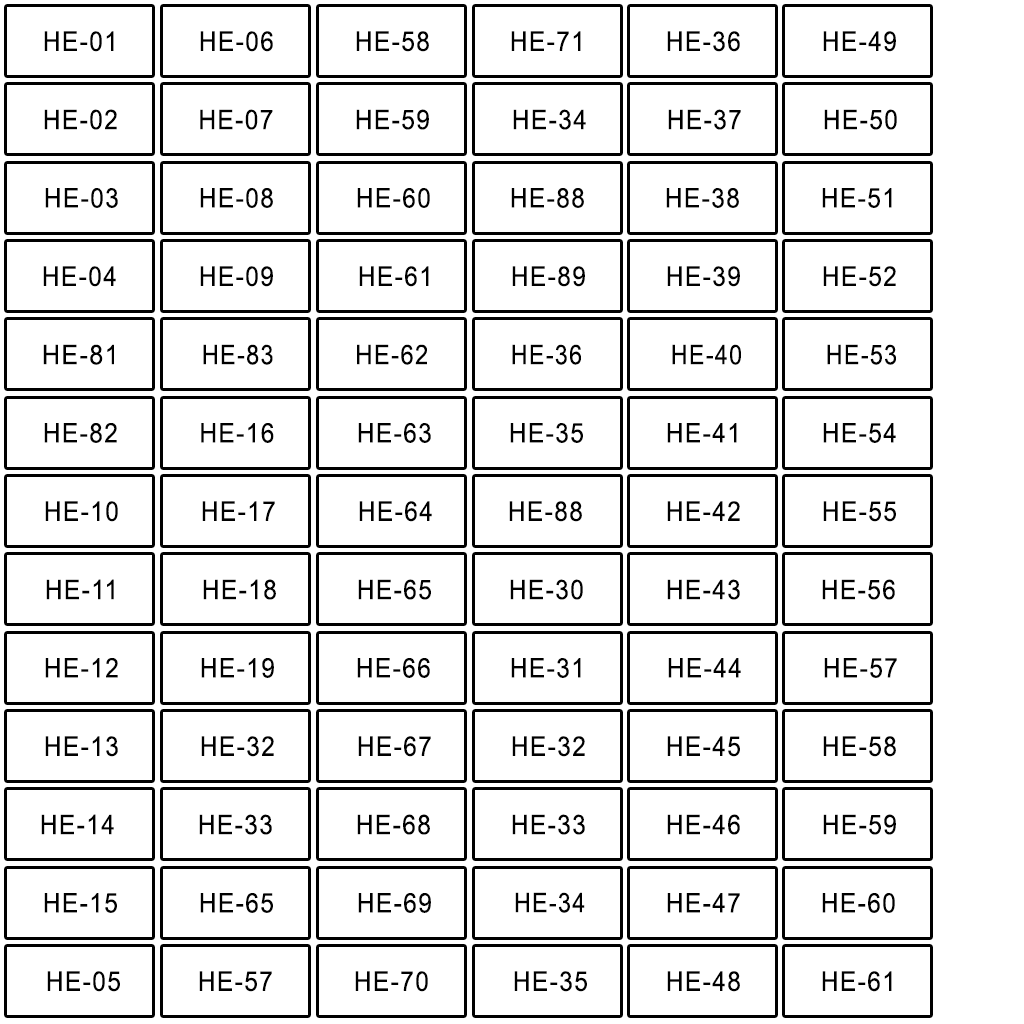
<style>
.page{position:relative;width:1024px;height:1024px;background:#ffffff}
.page>*{position:absolute;margin:0}
.t1{font:46.3px "ArialMT";letter-spacing:0.06em;color:#000000;scale:0.9 1}
.t2{font:46.4px "ArialMT";letter-spacing:0.06em;color:#000000;scale:0.92 1}
.t3{font:46.4px "ArialMT";letter-spacing:0.06em;color:#000000;scale:0.86 1}
.t4{font:46.4px "ArialMT";letter-spacing:0.06em;color:#000000;scale:0.88 1}
</style>
<div class="page">
<p class="t1" style="left:44px;top:31px;width:70px;height:21px">HE-01</p>
<p class="t1" style="left:200px;top:31px;width:73px;height:21px">HE-06</p>
<p class="t1" style="left:356px;top:31px;width:73px;height:21px">HE-58</p>
<p class="t1" style="left:511px;top:31px;width:70px;height:20px">HE-71</p>
<p class="t1" style="left:667px;top:31px;width:73px;height:21px">HE-36</p>
<p class="t1" style="left:823px;top:31px;width:73px;height:21px">HE-49</p>
<p class="t1" style="left:44px;top:109px;width:73px;height:21px">HE-02</p>
<p class="t1" style="left:200px;top:109px;width:73px;height:21px">HE-07</p>
<p class="t1" style="left:356px;top:109px;width:73px;height:21px">HE-59</p>
<p class="t1" style="left:513px;top:109px;width:73px;height:21px">HE-34</p>
<p class="t1" style="left:668px;top:109px;width:73px;height:21px">HE-37</p>
<p class="t1" style="left:824px;top:109px;width:73px;height:21px">HE-50</p>
<p class="t1" style="left:45px;top:188px;width:73px;height:20px">HE-03</p>
<p class="t1" style="left:200px;top:188px;width:73px;height:20px">HE-08</p>
<p class="t1" style="left:357px;top:188px;width:73px;height:20px">HE-60</p>
<p class="t1" style="left:511px;top:188px;width:73px;height:20px">HE-88</p>
<p class="t1" style="left:666px;top:188px;width:73px;height:20px">HE-38</p>
<p class="t1" style="left:822px;top:188px;width:70px;height:20px">HE-51</p>
<p class="t1" style="left:43px;top:266px;width:73px;height:21px">HE-04</p>
<p class="t1" style="left:200px;top:266px;width:73px;height:21px">HE-09</p>
<p class="t1" style="left:359px;top:266px;width:70px;height:21px">HE-61</p>
<p class="t1" style="left:512px;top:266px;width:73px;height:21px">HE-89</p>
<p class="t1" style="left:667px;top:266px;width:73px;height:21px">HE-39</p>
<p class="t1" style="left:823px;top:266px;width:73px;height:21px">HE-52</p>
<p class="t2" style="left:43px;top:344px;width:71px;height:21px">HE-81</p>
<p class="t3" style="left:203px;top:344px;width:70px;height:21px">HE-83</p>
<p class="t4" style="left:357px;top:344px;width:70px;height:21px">HE-62</p>
<p class="t3" style="left:512px;top:344px;width:69px;height:21px">HE-36</p>
<p class="t3" style="left:672px;top:344px;width:69px;height:21px">HE-40</p>
<p class="t3" style="left:827px;top:344px;width:69px;height:21px">HE-53</p>
<p class="t1" style="left:44px;top:423px;width:73px;height:20px">HE-82</p>
<p class="t1" style="left:201px;top:423px;width:73px;height:20px">HE-16</p>
<p class="t1" style="left:358px;top:423px;width:73px;height:20px">HE-63</p>
<p class="t1" style="left:510px;top:423px;width:73px;height:20px">HE-35</p>
<p class="t1" style="left:667px;top:423px;width:70px;height:20px">HE-41</p>
<p class="t1" style="left:823px;top:423px;width:73px;height:20px">HE-54</p>
<p class="t1" style="left:45px;top:501px;width:73px;height:21px">HE-10</p>
<p class="t1" style="left:202px;top:501px;width:73px;height:20px">HE-17</p>
<p class="t1" style="left:359px;top:501px;width:73px;height:21px">HE-64</p>
<p class="t1" style="left:509px;top:501px;width:73px;height:21px">HE-88</p>
<p class="t1" style="left:667px;top:501px;width:73px;height:20px">HE-42</p>
<p class="t1" style="left:823px;top:501px;width:73px;height:21px">HE-55</p>
<p class="t1" style="left:46px;top:579px;width:68px;height:21px">HE-11</p>
<p class="t1" style="left:203px;top:579px;width:73px;height:21px">HE-18</p>
<p class="t1" style="left:358px;top:579px;width:73px;height:21px">HE-65</p>
<p class="t1" style="left:510px;top:579px;width:73px;height:21px">HE-30</p>
<p class="t1" style="left:667px;top:579px;width:73px;height:21px">HE-43</p>
<p class="t1" style="left:822px;top:579px;width:73px;height:21px">HE-56</p>
<p class="t1" style="left:45px;top:658px;width:73px;height:20px">HE-12</p>
<p class="t1" style="left:201px;top:658px;width:73px;height:20px">HE-19</p>
<p class="t1" style="left:357px;top:658px;width:73px;height:20px">HE-66</p>
<p class="t1" style="left:511px;top:658px;width:70px;height:20px">HE-31</p>
<p class="t1" style="left:668px;top:658px;width:73px;height:20px">HE-44</p>
<p class="t1" style="left:824px;top:658px;width:73px;height:20px">HE-57</p>
<p class="t1" style="left:45px;top:736px;width:73px;height:21px">HE-13</p>
<p class="t1" style="left:201px;top:736px;width:73px;height:21px">HE-32</p>
<p class="t1" style="left:358px;top:736px;width:73px;height:21px">HE-67</p>
<p class="t1" style="left:512px;top:736px;width:73px;height:21px">HE-32</p>
<p class="t1" style="left:667px;top:736px;width:73px;height:21px">HE-45</p>
<p class="t1" style="left:823px;top:736px;width:73px;height:21px">HE-58</p>
<p class="t1" style="left:41px;top:814px;width:73px;height:21px">HE-14</p>
<p class="t1" style="left:199px;top:814px;width:73px;height:21px">HE-33</p>
<p class="t1" style="left:357px;top:814px;width:73px;height:21px">HE-68</p>
<p class="t1" style="left:512px;top:814px;width:73px;height:21px">HE-33</p>
<p class="t1" style="left:667px;top:814px;width:73px;height:21px">HE-46</p>
<p class="t1" style="left:823px;top:814px;width:73px;height:21px">HE-59</p>
<p class="t1" style="left:44px;top:893px;width:73px;height:20px">HE-15</p>
<p class="t1" style="left:200px;top:893px;width:73px;height:20px">HE-65</p>
<p class="t1" style="left:358px;top:893px;width:73px;height:20px">HE-69</p>
<p class="t3" style="left:515px;top:892px;width:70px;height:21px">HE-34</p>
<p class="t1" style="left:667px;top:893px;width:73px;height:20px">HE-47</p>
<p class="t1" style="left:822px;top:893px;width:73px;height:20px">HE-60</p>
<p class="t1" style="left:47px;top:971px;width:73px;height:21px">HE-05</p>
<p class="t1" style="left:199px;top:971px;width:73px;height:21px">HE-57</p>
<p class="t1" style="left:355px;top:971px;width:73px;height:21px">HE-70</p>
<p class="t1" style="left:514px;top:971px;width:73px;height:21px">HE-35</p>
<p class="t1" style="left:667px;top:971px;width:73px;height:21px">HE-48</p>
<p class="t1" style="left:822px;top:971px;width:70px;height:21px">HE-61</p>
</div>
